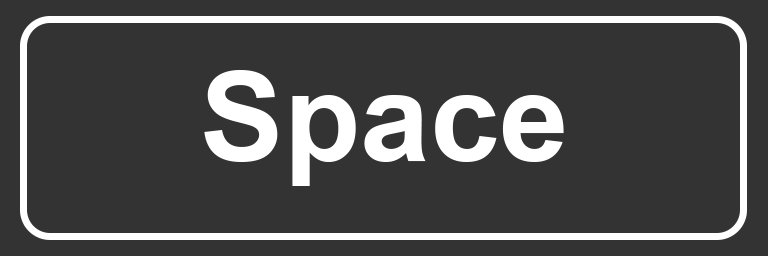
<style>
.page{position:relative;width:768px;height:256px;background:#333333}
.page>*{position:absolute;margin:0}
.t1{font:125px "Arial-BoldMT";color:#ffffff}
</style>
<div class="page">
<p class="t1" style="left:204px;top:70px;width:360px;height:116px">Space</p>
</div>
